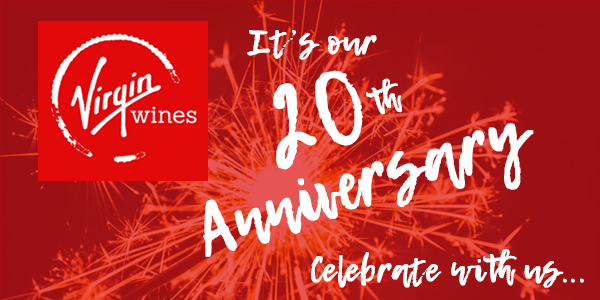
<style>
.page{position:relative;width:600px;height:300px}
.page>*{position:absolute;margin:0}
.t1{font:57px "LemonTuesday";color:#ffffff;font-weight:bold}
.t2{font:67px "LemonTuesday";color:#ffffff;font-weight:bold}
.t3{font:108px "LemonTuesday";color:#ffffff;font-weight:bold}
</style>
<div class="page">
<p class="t1" style="left:247px;top:30px;width:130px;height:30px">It’s our</p>
<p class="t2" style="left:203px;top:70px;width:331px;height:187px;text-align:center;rotate:-17deg"><span class="t3">20</span><span class="t1">th <br></span>Anniversary</p>
<p class="t1" style="left:311px;top:249px;width:273px;height:39px">Celebrate with us...</p>
</div>
